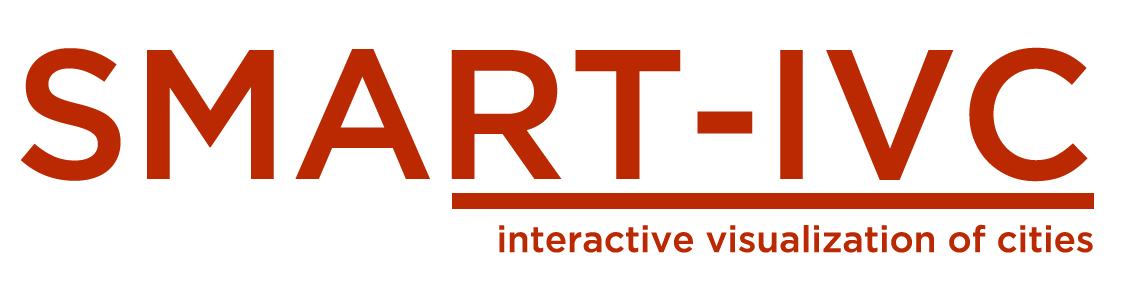
<style>
.page{position:relative;width:1148px;height:300px;background:#ffffff}
.page>*{position:absolute;margin:0}
.t1{font:183.9px "GothamMedium";color:#bb2902}
.t2{font:36.8px "GothamMedium";color:#bb2902}
</style>
<div class="page">
<p class="t1" style="left:20px;top:47px;width:1068px;height:135px">SMART-IVC</p>
<p class="t2" style="left:499px;top:224px;width:594px;height:29px">interactive visualization of cities</p>
</div>
